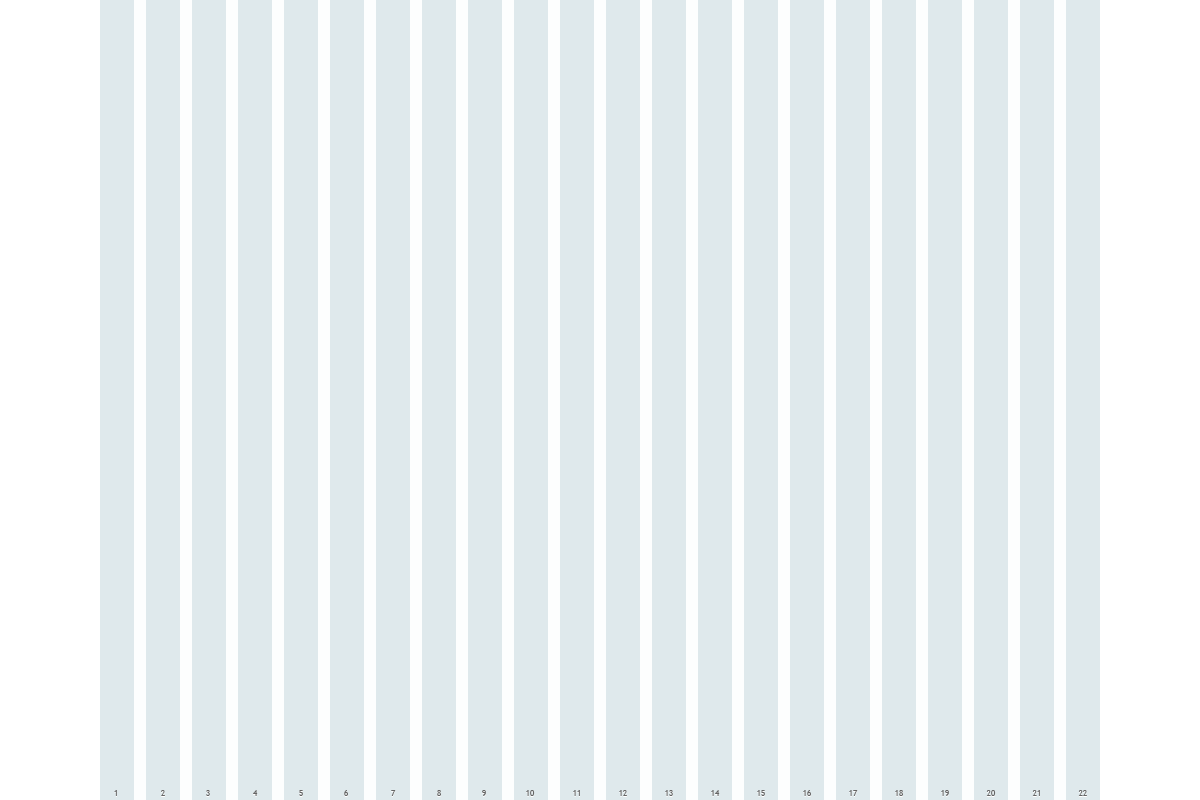
<style>
.page{position:relative;width:1200px;height:800px;background:#dfe9ec}
.page>*{position:absolute;margin:0}
.t1{font:8px "TrebuchetMS";color:#666666}
</style>
<div class="page">
<p class="t1" style="left:114px;top:790px;width:3px;height:6px">1</p>
<p class="t1" style="left:161px;top:790px;width:4px;height:6px">2</p>
<p class="t1" style="left:206px;top:790px;width:4px;height:6px">3</p>
<p class="t1" style="left:253px;top:790px;width:5px;height:6px">4</p>
<p class="t1" style="left:299px;top:790px;width:4px;height:6px">5</p>
<p class="t1" style="left:344px;top:790px;width:4px;height:6px">6</p>
<p class="t1" style="left:391px;top:790px;width:5px;height:6px">7</p>
<p class="t1" style="left:437px;top:790px;width:4px;height:6px">8</p>
<p class="t1" style="left:482px;top:790px;width:4px;height:6px">9</p>
<p class="t1" style="left:526px;top:790px;width:9px;height:6px">10</p>
<p class="t1" style="left:573px;top:790px;width:7px;height:6px">11</p>
<p class="t1" style="left:619px;top:790px;width:8px;height:6px">12</p>
<p class="t1" style="left:665px;top:790px;width:8px;height:6px">13</p>
<p class="t1" style="left:711px;top:790px;width:9px;height:6px">14</p>
<p class="t1" style="left:757px;top:790px;width:8px;height:6px">15</p>
<p class="t1" style="left:803px;top:790px;width:8px;height:6px">16</p>
<p class="t1" style="left:849px;top:790px;width:9px;height:6px">17</p>
<p class="t1" style="left:895px;top:790px;width:8px;height:6px">18</p>
<p class="t1" style="left:941px;top:790px;width:8px;height:6px">19</p>
<p class="t1" style="left:986px;top:790px;width:10px;height:6px">20</p>
<p class="t1" style="left:1032px;top:790px;width:8px;height:6px">21</p>
<p class="t1" style="left:1078px;top:790px;width:9px;height:6px">22</p>
</div>
